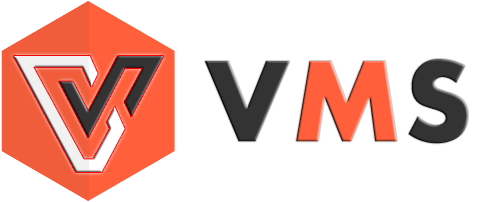
<style>
.page{position:relative;width:480px;height:202px;background:#ffffff}
.page>*{position:absolute;margin:0}
.t1{font:119px "Aharoni-Bold";color:#333333;text-transform:uppercase;font-weight:bold}
.t2{font:119px "Aharoni-Bold";color:#ff5f3b;text-transform:uppercase;font-weight:bold}
</style>
<div class="page">
<p class="t1" style="left:205px;top:59px;width:263px;height:85px">V<span class="t2">M</span>S</p>
</div>
